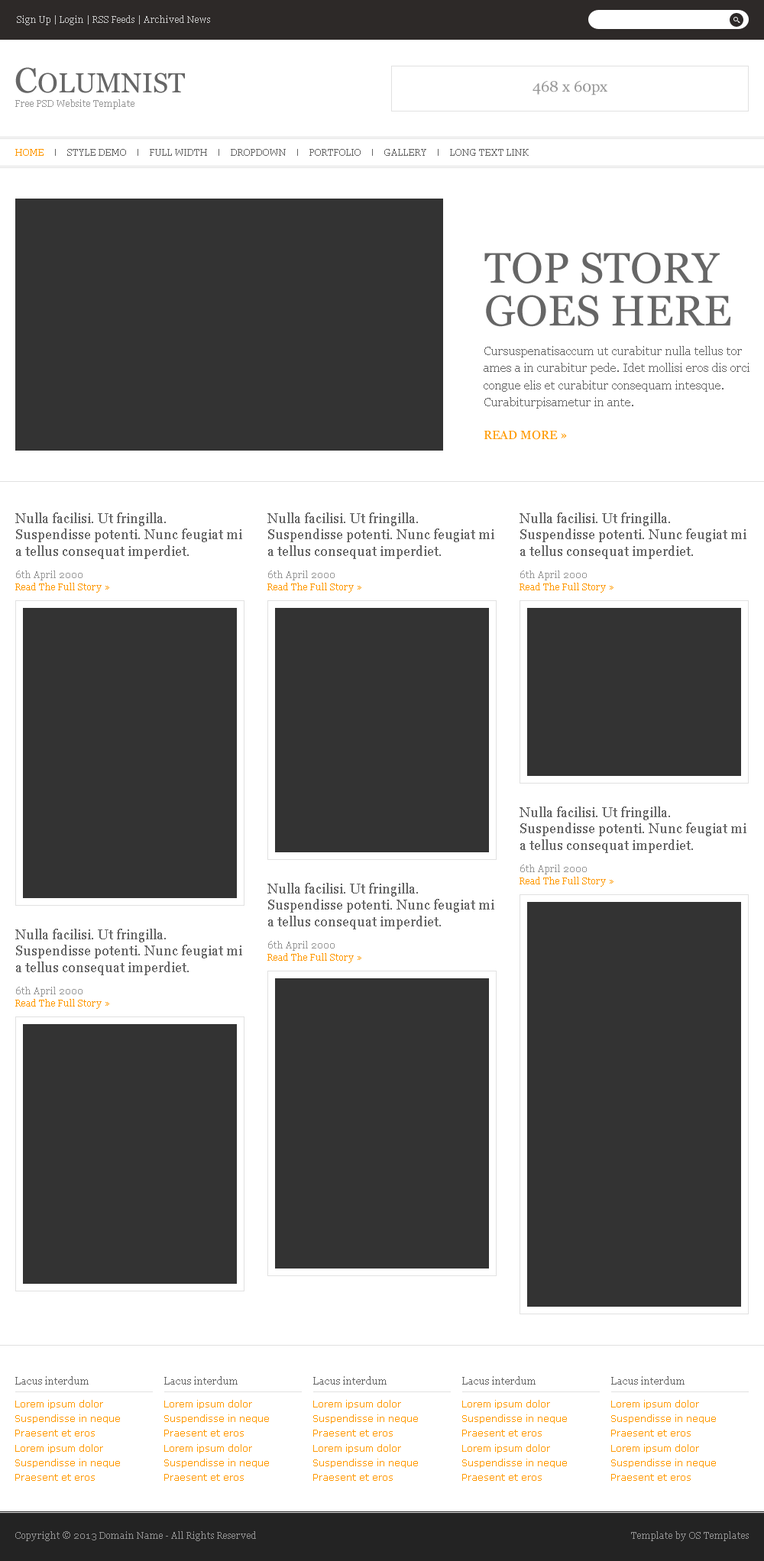
<style>
.page{position:relative;width:764px;height:1561px;background:#ffffff}
.page>*{position:absolute;margin:0}
.t1{font:9.2px "Georgia";color:#c4c4c4}
.t2{font:27.5px "Georgia";color:#666666}
.t3{font:35.1px "Georgia";color:#666666}
.t4{font:15.3px "Georgia";color:#999999}
.t5{font:9.2px "Georgia";color:#999999}
.t6{font:9.2px "Georgia";color:#ff9900}
.t7{font:9.2px "Georgia";color:#666666}
.t8{font:42.8px/42.8px "Georgia";color:#666666}
.t9{font:12.2px/17.1px "Georgia";color:#666666}
.t10{font:12.2px "Georgia";color:#ff9900}
.t11{font:13.7px/16.5px "Georgia";color:#666666}
.t12{font:9.2px/12.8px "Georgia";color:#989898}
.t13{font:9.2px/12.8px "Georgia";color:#ff9900}
.t14{font:9.9px "Georgia";color:#666666}
.t15{font:9.2px/14.7px "Verdana";color:#ff9900}
.t16{font:9.2px "Georgia";color:#919191}
</style>
<div class="page">
<p class="t1" style="left:17px;top:15px;width:193px;height:10px">Sign Up | Login | RSS Feeds | Archived News</p>
<p class="t2" style="left:15px;top:67px;width:170px;height:26px"><span class="t3">C</span>OLUMNIST</p>
<p class="t4" style="left:532px;top:81px;width:75px;height:14px">468 x 60px</p>
<p class="t5" style="left:15px;top:99px;width:119px;height:10px">Free PSD Website Template</p>
<p class="t6" style="left:15px;top:149px;width:29px;height:7px">HOME</p>
<p class="t7" style="left:67px;top:149px;width:59px;height:7px">STYLE DEMO</p>
<p class="t7" style="left:150px;top:149px;width:57px;height:7px">FULL WIDTH</p>
<p class="t7" style="left:231px;top:149px;width:55px;height:7px">DROPDOWN</p>
<p class="t7" style="left:309px;top:149px;width:52px;height:7px">PORTFOLIO</p>
<p class="t7" style="left:384px;top:149px;width:42px;height:7px">GALLERY</p>
<p class="t7" style="left:450px;top:149px;width:79px;height:7px">LONG TEXT LINK</p>
<p class="t8" style="left:484px;top:252px;width:247px;height:75px">TOP STORY    GOES HERE</p>
<p class="t9" style="left:483px;top:346px;width:266px;height:63px">Cursuspenatisaccum ut curabitur nulla tellus tor ames a in curabitur pede. Idet mollisi eros dis orci congue elis et curabitur consequam intesque. Curabiturpisametur in ante.</p>
<p class="t10" style="left:483px;top:430px;width:84px;height:10px">READ MORE »</p>
<p class="t11" style="left:15px;top:513px;width:227px;height:80px">Nulla facilisi. Ut fringilla. Suspendisse potenti. Nunc feugiat mi a tellus consequat imperdiet.<br><br><span class="t12">6th April 2000<br></span><span class="t13">Read The Full Story »</span></p>
<p class="t11" style="left:267px;top:513px;width:227px;height:80px">Nulla facilisi. Ut fringilla. Suspendisse potenti. Nunc feugiat mi a tellus consequat imperdiet.<br><br><span class="t12">6th April 2000<br></span><span class="t13">Read The Full Story »</span></p>
<p class="t11" style="left:519px;top:513px;width:227px;height:80px">Nulla facilisi. Ut fringilla. Suspendisse potenti. Nunc feugiat mi a tellus consequat imperdiet.<br><br><span class="t12">6th April 2000<br></span><span class="t13">Read The Full Story »</span></p>
<p class="t11" style="left:519px;top:807px;width:227px;height:80px">Nulla facilisi. Ut fringilla. Suspendisse potenti. Nunc feugiat mi a tellus consequat imperdiet.<br><br><span class="t12">6th April 2000<br></span><span class="t13">Read The Full Story »</span></p>
<p class="t11" style="left:267px;top:883px;width:227px;height:80px">Nulla facilisi. Ut fringilla. Suspendisse potenti. Nunc feugiat mi a tellus consequat imperdiet.<br><br><span class="t12">6th April 2000<br></span><span class="t13">Read The Full Story »</span></p>
<p class="t11" style="left:15px;top:929px;width:227px;height:80px">Nulla facilisi. Ut fringilla. Suspendisse potenti. Nunc feugiat mi a tellus consequat imperdiet.<br><br><span class="t12">6th April 2000<br></span><span class="t13">Read The Full Story »</span></p>
<p class="t14" style="left:15px;top:1376px;width:74px;height:9px">Lacus interdum</p>
<p class="t14" style="left:164px;top:1376px;width:74px;height:9px">Lacus interdum</p>
<p class="t14" style="left:313px;top:1376px;width:73px;height:9px">Lacus interdum</p>
<p class="t14" style="left:462px;top:1376px;width:73px;height:9px">Lacus interdum</p>
<p class="t14" style="left:611px;top:1376px;width:73px;height:9px">Lacus interdum</p>
<p class="t15" style="left:15px;top:1400px;width:105px;height:81px">Lorem ipsum dolor<br>Suspendisse in neque<br>Praesent et eros<br>Lorem ipsum dolor<br>Suspendisse in neque<br>Praesent et eros</p>
<p class="t15" style="left:164px;top:1400px;width:105px;height:81px">Lorem ipsum dolor<br>Suspendisse in neque<br>Praesent et eros<br>Lorem ipsum dolor<br>Suspendisse in neque<br>Praesent et eros</p>
<p class="t15" style="left:313px;top:1400px;width:105px;height:81px">Lorem ipsum dolor<br>Suspendisse in neque<br>Praesent et eros<br>Lorem ipsum dolor<br>Suspendisse in neque<br>Praesent et eros</p>
<p class="t15" style="left:462px;top:1400px;width:105px;height:81px">Lorem ipsum dolor<br>Suspendisse in neque<br>Praesent et eros<br>Lorem ipsum dolor<br>Suspendisse in neque<br>Praesent et eros</p>
<p class="t15" style="left:611px;top:1400px;width:105px;height:81px">Lorem ipsum dolor<br>Suspendisse in neque<br>Praesent et eros<br>Lorem ipsum dolor<br>Suspendisse in neque<br>Praesent et eros</p>
<p class="t16" style="left:15px;top:1531px;width:241px;height:10px">Copyright © 2013 Domain Name - All Rights Reserved</p>
<p class="t16" style="left:631px;top:1531px;width:118px;height:10px">Template by OS Templates</p>
</div>
